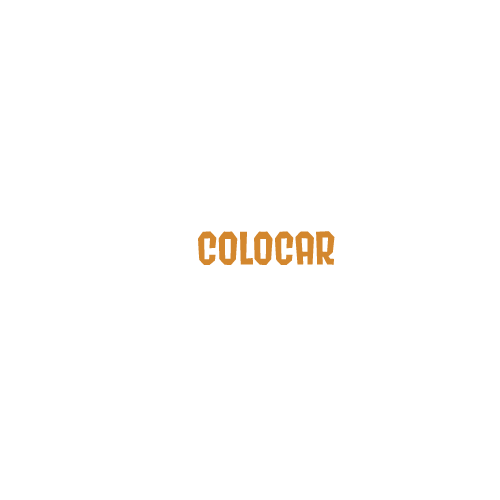
<style>
.page{position:relative;width:500px;height:500px;background:#ffffff}
.page>*{position:absolute;margin:0}
.t1{font:40px "Splatfont2";color:#d3872e}
</style>
<div class="page">
<p class="t1" style="left:198px;top:231px;width:137px;height:34px">COLOCAR</p>
</div>
